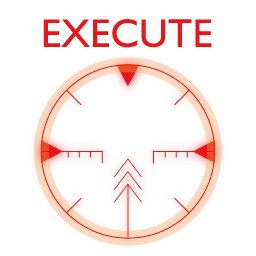
<style>
.page{position:relative;width:256px;height:256px;background:#ffffff}
.page>*{position:absolute;margin:0}
.t1{font:40px "GillSansMT";letter-spacing:0.01em;color:#e7161a}
</style>
<div class="page">
<p class="t1" style="left:43px;top:19px;width:169px;height:29px">EXECUTE</p>
</div>
